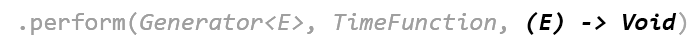
<style>
.page{position:relative;width:700px;height:50px;background:#ffffff}
.page>*{position:absolute;margin:0}
.t1{font:25px "Consolas-Italic";color:#9f9f9f}
.t2{font:25px "Consolas";color:#9f9f9f}
.t3{font:25px "Consolas";color:#a6a6a6}
.t4{font:25px "Consolas-BoldItalic";color:#000000}
</style>
<div class="page">
<p class="t1" style="left:20px;top:12px;width:667px;height:23px"><span class="t2">.perform(</span>Generator&lt;E&gt;<span class="t2">, </span>TimeFunction<span class="t2">, </span>(E) -&gt; Void<span class="t3">)</span></p>
<p class="t1" style="left:20px;top:12px;width:667px;height:23px"><span class="t2">.perform(</span>Generator&lt;E&gt;<span class="t2">, </span>TimeFunction<span class="t2">, </span><span class="t4">(E) -&gt; Void</span><span class="t3">)</span></p>
</div>
